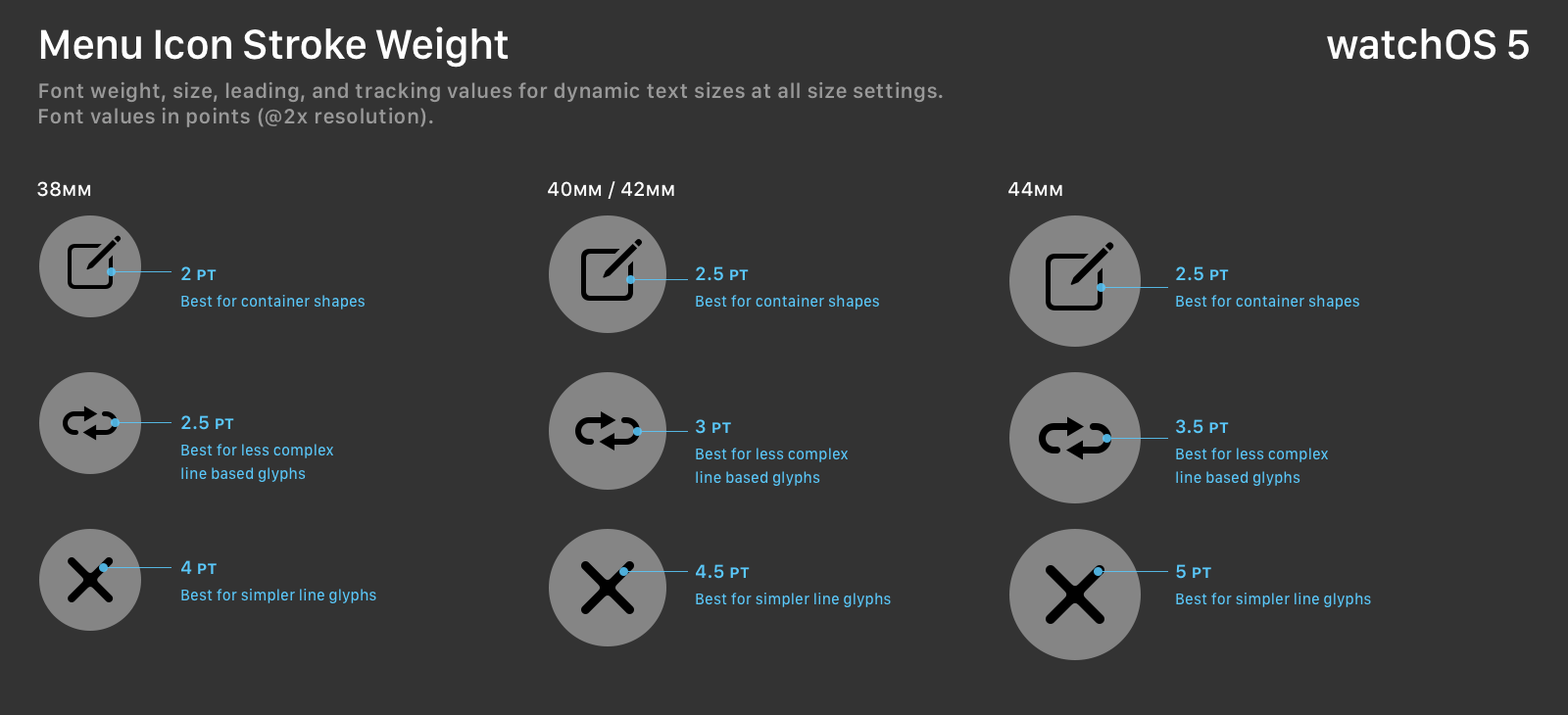
<style>
.page{position:relative;width:1568px;height:715px;background:#333333}
.page>*{position:absolute;margin:0}
.t1{font:43.1px "SFCompactText-Medium";letter-spacing:-0.026em;color:#ffffff}
.t2{font:21.6px/25.5px "SFCompactText-Medium";letter-spacing:0.015em;color:#999999}
.t3{font:19.6px "SFProText-Medium";color:#ffffff}
.t4{font:19.6px "SFProText-Medium";color:#ffffff;font-variant:small-caps}
.t5{font:19.6px "SFCompactText-Medium";color:#5ac8fa;font-variant:small-caps}
.t6{font:19.6px "SFCompactText-Medium";color:#5ac8fa}
.t7{font:15.7px "SFCompactText-Regular";color:#5ac8fa}
.t8{font:15.7px/23.5px "SFCompactText-Regular";color:#5ac8fa}
</style>
<div class="page">
<p class="t1" style="left:40px;top:26px;width:469px;height:42px">Menu Icon Stroke Weight</p>
<p class="t1" style="left:1327px;top:28px;width:202px;height:32px">watchOS 5</p>
<p class="t2" style="left:38px;top:81px;width:905px;height:46px">Font weight, size, leading, and tracking values for dynamic text sizes at all size settings.<br>Font values in points (@2x resolution).</p>
<p class="t3" style="left:37px;top:181px;width:54px;height:16px">38<span class="t4">mm</span></p>
<p class="t3" style="left:548px;top:181px;width:126px;height:18px">40<span class="t4">mm</span> / 42<span class="t4">mm</span></p>
<p class="t3" style="left:1008px;top:181px;width:54px;height:15px">44<span class="t4">mm</span></p>
<p class="t5" style="left:181px;top:267px;width:36px;height:13px"><span class="t6">2</span> pt</p>
<p class="t6" style="left:696px;top:267px;width:53px;height:14px">2.5<span class="t5"> pt</span></p>
<p class="t6" style="left:1176px;top:267px;width:53px;height:14px">2.5<span class="t5"> pt</span></p>
<p class="t7" style="left:181px;top:295px;width:184px;height:15px">Best for container shapes</p>
<p class="t7" style="left:696px;top:295px;width:183px;height:15px">Best for container shapes</p>
<p class="t7" style="left:1176px;top:295px;width:183px;height:15px">Best for container shapes</p>
<p class="t6" style="left:181px;top:416px;width:53px;height:14px">2.5<span class="t5"> pt</span></p>
<p class="t5" style="left:696px;top:419px;width:35px;height:15px"><span class="t6">3 </span>pt</p>
<p class="t6" style="left:1176px;top:419px;width:53px;height:15px">3.5 <span class="t5">pt</span></p>
<p class="t8" style="left:181px;top:444px;width:152px;height:38px">Best for less complex<br>line based glyphs</p>
<p class="t8" style="left:696px;top:448px;width:152px;height:38px">Best for less complex<br>line based glyphs</p>
<p class="t8" style="left:1176px;top:448px;width:152px;height:38px">Best for less complex<br>line based glyphs</p>
<p class="t5" style="left:181px;top:561px;width:36px;height:13px"><span class="t6">4</span> pt</p>
<p class="t6" style="left:696px;top:564px;width:54px;height:15px">4.5<span class="t5"> pt</span></p>
<p class="t5" style="left:1176px;top:564px;width:35px;height:15px"><span class="t6">5</span> pt</p>
<p class="t7" style="left:181px;top:589px;width:195px;height:15px">Best for simpler line glyphs</p>
<p class="t7" style="left:696px;top:593px;width:195px;height:15px">Best for simpler line glyphs</p>
<p class="t7" style="left:1176px;top:593px;width:195px;height:15px">Best for simpler line glyphs</p>
</div>
